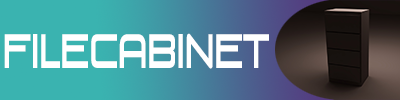
<style>
.page{position:relative;width:400px;height:100px;background:#3ab3b0}
.page>*{position:absolute;margin:0}
.t1{font:45.8px "VenusRising-Regular";color:#ffffff;scale:0.62 1}
</style>
<div class="page">
<p class="t1" style="left:4px;top:33px;width:265px;height:36px">FileCabinet</p>
</div>
